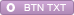
<style>
.page{position:relative;width:74px;height:15px}
.page>*{position:absolute;margin:0}
.t1{font:12px "HelveticaNeue-Heavy";letter-spacing:0.01em;color:#ffffff}
.t2{font:10px "ArialMT";letter-spacing:0.01em;color:#ffffff}
</style>
<div class="page">
<p class="t1" style="left:6px;top:3px;width:9px;height:9px">O</p>
<p class="t2" style="left:24px;top:4px;width:42px;height:7px">BTN TXT</p>
</div>
